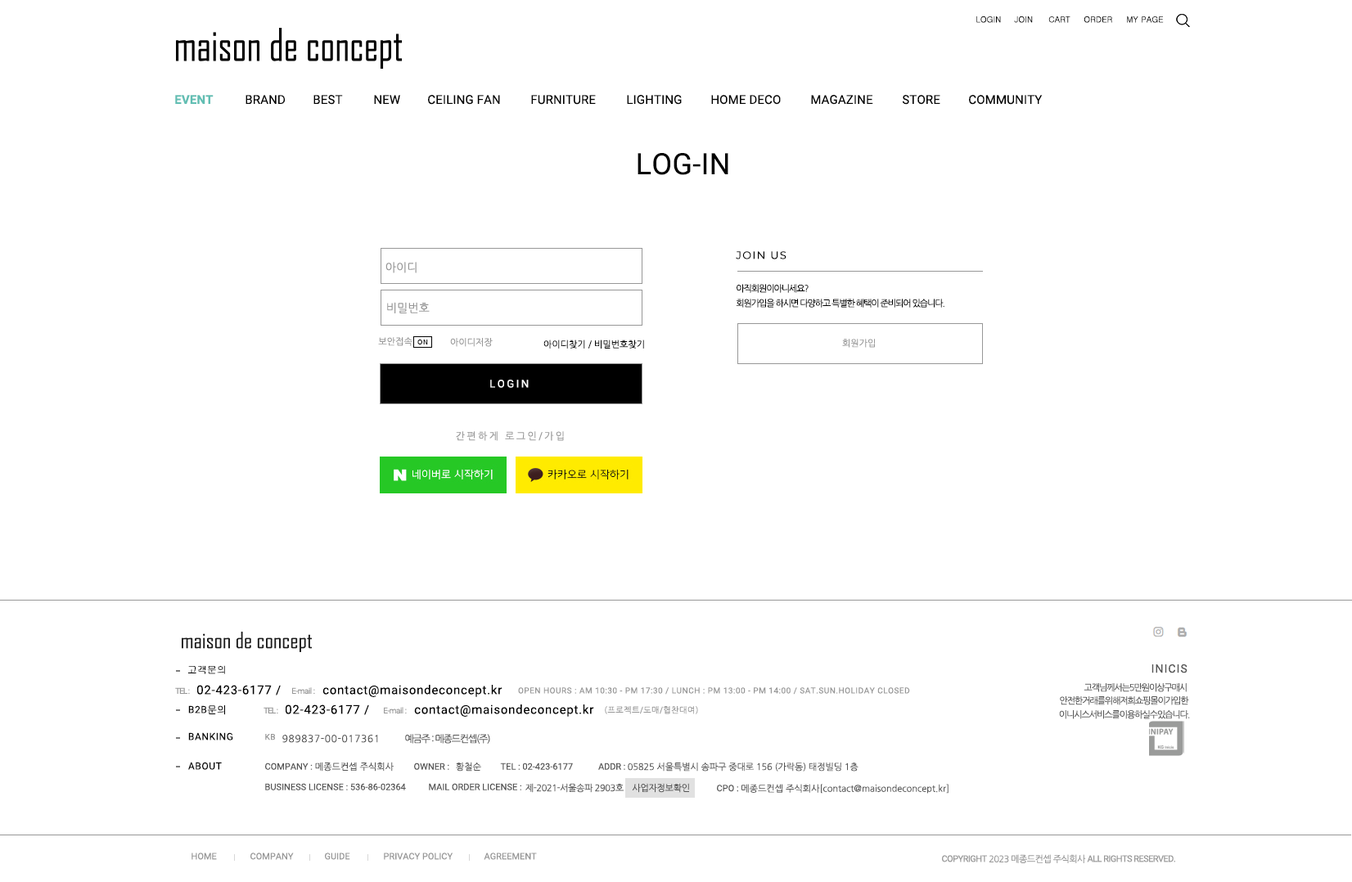
<style>
.page{position:relative;width:1352px;height:882px;background:#ffffff}
.page>*{position:absolute;margin:0}
.t1{font:8.2px "Gulim";letter-spacing:0.01em;color:#000000}
.t2{font:12.3px "Roboto-Bold";letter-spacing:0.01em;color:#61beb3}
.t3{font:12.3px "Roboto-Regular";letter-spacing:0.01em;color:#000000}
.t4{font:29.5px "Roboto-Regular";letter-spacing:0.01em;color:#000000}
.t5{font:10.6px "Montserrat-Regular";letter-spacing:0.1em;color:#000000}
.t6{font:11.5px "NanumGothic";letter-spacing:0.01em;color:#979797}
.t7{font:9px "NanumGothic";letter-spacing:-0.1em;color:#000000}
.t8{font:9px "NanumGothic";letter-spacing:0.01em;color:#979797}
.t9{font:9px "NanumGothic";color:#979797}
.t10{font:9px "NanumGothic";color:#000000}
.t11{font:10.6px "Roboto-Regular";letter-spacing:0.2em;color:#ffffff}
.t12{font:9.8px "NanumGothic";letter-spacing:0.2em;color:#979797}
.t13{font:9.8px "Gulim";color:#000000}
.t14{font:11.5px "Roboto-Regular";letter-spacing:0.075em;color:#555555}
.t15{font:8.2px "Roboto-Regular";letter-spacing:-0.1em;color:#979797}
.t16{font:12.3px "Roboto-Regular";letter-spacing:0.05em;color:#000000}
.t17{font:8.2px "Roboto-Regular";letter-spacing:-0.05em;color:#979797}
.t18{font:8.2px "Roboto-Regular";letter-spacing:0.05em;color:#979797}
.t19{font:9px "NanumGothic";letter-spacing:-0.1em;color:#555555}
.t20{font:9.8px "Roboto-Regular";letter-spacing:0.05em;color:#000000}
.t21{font:9.8px "NanumGothic";letter-spacing:0.05em;color:#000000}
.t22{font:8.2px "NanumGothic";letter-spacing:0.05em;color:#979797}
.t23{font:9.8px "NanumGothic";letter-spacing:0.05em;color:#555555}
.t24{font:9.8px "NanumGothic";letter-spacing:-0.1em;color:#555555}
.t25{font:9px "NanumGothic";color:#555555}
.t26{font:9px "NanumGothic";letter-spacing:-0.01em;color:#555555}
.t27{font:9px "Roboto-Regular";letter-spacing:-0.01em;color:#555555}
.t28{font:9px "Roboto-Regular";color:#555555}
.t29{font:9px "NanumGothic";letter-spacing:-0.035em;color:#555555}
.t30{font:9px "NanumGothic";letter-spacing:-0.025em;color:#555555}
.t31{font:9px "Roboto-Regular";color:#979797}
.t32{font:9px "Roboto-Regular";letter-spacing:-0.05em;color:#979797}
.t33{font:9px "NanumGothic";letter-spacing:-0.05em;color:#979797}
</style>
<div class="page">
<p class="t1" style="left:976px;top:16px;width:25px;height:7px">LOGIN</p>
<p class="t1" style="left:1014px;top:16px;width:19px;height:7px">JOIN</p>
<p class="t1" style="left:1048px;top:16px;width:22px;height:7px">CART</p>
<p class="t1" style="left:1083px;top:16px;width:29px;height:7px">ORDER</p>
<p class="t1" style="left:1127px;top:16px;width:37px;height:7px">MY PAGE</p>
<p class="t2" style="left:175px;top:95px;width:39px;height:9px">EVENT</p>
<p class="t3" style="left:245px;top:95px;width:40px;height:9px">BRAND</p>
<p class="t3" style="left:313px;top:95px;width:30px;height:10px">BEST</p>
<p class="t3" style="left:374px;top:95px;width:26px;height:9px">NEW</p>
<p class="t3" style="left:428px;top:95px;width:72px;height:10px">CEILING FAN</p>
<p class="t3" style="left:531px;top:95px;width:65px;height:10px">FURNITURE</p>
<p class="t3" style="left:627px;top:95px;width:55px;height:10px">LIGHTING</p>
<p class="t3" style="left:711px;top:95px;width:70px;height:10px">HOME DECO</p>
<p class="t3" style="left:811px;top:95px;width:62px;height:10px">MAGAZINE</p>
<p class="t3" style="left:902px;top:95px;width:38px;height:10px">STORE</p>
<p class="t3" style="left:969px;top:95px;width:73px;height:10px">COMMUNITY</p>
<p class="t4" style="left:637px;top:153px;width:91px;height:22px">LOG-IN</p>
<p class="t5" style="left:736px;top:251px;width:50px;height:8px">JOIN US</p>
<p class="t6" style="left:385px;top:262px;width:32px;height:11px">아이디</p>
<p class="t7" style="left:736px;top:284px;width:72px;height:9px">아직회원이아니세요?</p>
<p class="t6" style="left:387px;top:302px;width:43px;height:11px">비밀번호</p>
<p class="t7" style="left:736px;top:299px;width:208px;height:9px">회원가입을 하시면 다양하고 특별한 혜택이 준비되어 있습니다.</p>
<p class="t8" style="left:378px;top:337px;width:34px;height:9px">보안접속</p>
<p class="t9" style="left:450px;top:338px;width:43px;height:9px">아이디저장</p>
<p class="t10" style="left:543px;top:340px;width:101px;height:9px">아이디찾기 / 비밀번호찾기</p>
<p class="t9" style="left:842px;top:339px;width:33px;height:9px">회원가입</p>
<p class="t11" style="left:490px;top:380px;width:39px;height:8px">LOGIN</p>
<p class="t12" style="left:456px;top:431px;width:108px;height:10px">간편하게 로그인/가입</p>
<p class="t13" style="left:187px;top:665px;width:38px;height:9px">고객문의</p>
<p class="t14" style="left:1151px;top:664px;width:36px;height:9px">INICIS</p>
<p class="t15" style="left:175px;top:687px;width:15px;height:8px">TEL :</p>
<p class="t16" style="left:197px;top:685px;width:84px;height:11px">02-423-6177 /</p>
<p class="t17" style="left:292px;top:687px;width:23px;height:8px">E-mail :</p>
<p class="t16" style="left:322px;top:685px;width:180px;height:12px">contact@maisondeconcept.kr</p>
<p class="t18" style="left:518px;top:687px;width:392px;height:8px">OPEN HOURS : AM 10:30 - PM 17:30 / LUNCH : PM 13:00 - PM 14:00 / SAT.SUN.HOLIDAY CLOSED</p>
<p class="t19" style="left:1083px;top:683px;width:104px;height:9px">고객님께서는5만원이상구매시</p>
<p class="t19" style="left:1060px;top:696px;width:129px;height:9px">안전한거래를위해저희쇼핑몰이가입한</p>
<p class="t20" style="left:188px;top:705px;width:37px;height:10px">B2B<span class="t21">문의</span></p>
<p class="t15" style="left:263px;top:707px;width:15px;height:7px">TEL :</p>
<p class="t16" style="left:286px;top:705px;width:83px;height:10px">02-423-6177 /</p>
<p class="t17" style="left:384px;top:707px;width:23px;height:7px">E-mail :</p>
<p class="t16" style="left:414px;top:705px;width:180px;height:12px">contact@maisondeconcept.kr</p>
<p class="t22" style="left:605px;top:706px;width:93px;height:8px">(프로젝트/도매/협찬대여)</p>
<p class="t19" style="left:1059px;top:710px;width:131px;height:9px">이니시스서비스를이용하실수있습니다.</p>
<p class="t20" style="left:188px;top:732px;width:45px;height:9px">BANKING</p>
<p class="t18" style="left:265px;top:734px;width:10px;height:7px">KB</p>
<p class="t23" style="left:282px;top:735px;width:96px;height:8px">989837-00-017361</p>
<p class="t24" style="left:405px;top:734px;width:85px;height:10px">예금주 : 메종드컨셉(주)</p>
<p class="t20" style="left:188px;top:762px;width:34px;height:8px">ABOUT</p>
<p class="t25" style="left:315px;top:762px;width:79px;height:10px">메종드컨셉 주식회사</p>
<p class="t25" style="left:456px;top:762px;width:25px;height:10px">황철순</p>
<p class="t26" style="left:598px;top:762px;width:260px;height:10px"><span class="t27">ADDR : </span>05825 서울특별시 송파구 중대로 156 (가락동) 태정빌딩 1층</p>
<p class="t28" style="left:265px;top:763px;width:48px;height:7px">COMPANY :</p>
<p class="t28" style="left:414px;top:763px;width:35px;height:7px">OWNER :</p>
<p class="t28" style="left:500px;top:763px;width:73px;height:7px">TEL : 02-423-6177</p>
<p class="t28" style="left:265px;top:783px;width:141px;height:7px">BUSINESS LICENSE : 536-86-02364</p>
<p class="t28" style="left:429px;top:783px;width:92px;height:7px">MAIL ORDER LICENSE :</p>
<p class="t29" style="left:525px;top:783px;width:99px;height:10px">제-2021-서울송파 2903호</p>
<p class="t30" style="left:632px;top:783px;width:57px;height:10px">사업자정보확인</p>
<p class="t25" style="left:717px;top:784px;width:231px;height:10px"><span class="t28">CPO : </span>메종드컨셉 주식회사[contact@maisondeconcept.kr]</p>
<p class="t31" style="left:191px;top:853px;width:26px;height:7px">HOME</p>
<p class="t31" style="left:250px;top:853px;width:44px;height:7px">COMPANY</p>
<p class="t31" style="left:325px;top:853px;width:25px;height:7px">GUIDE</p>
<p class="t31" style="left:384px;top:853px;width:69px;height:7px">PRIVACY POLICY</p>
<p class="t31" style="left:484px;top:853px;width:53px;height:7px">AGREEMENT</p>
<p class="t32" style="left:942px;top:854px;width:233px;height:9px">COPYRIGHT <span class="t33">2023 메종드컨셉 주식회사 </span>ALL RIGHTS RESERVED.</p>
</div>
